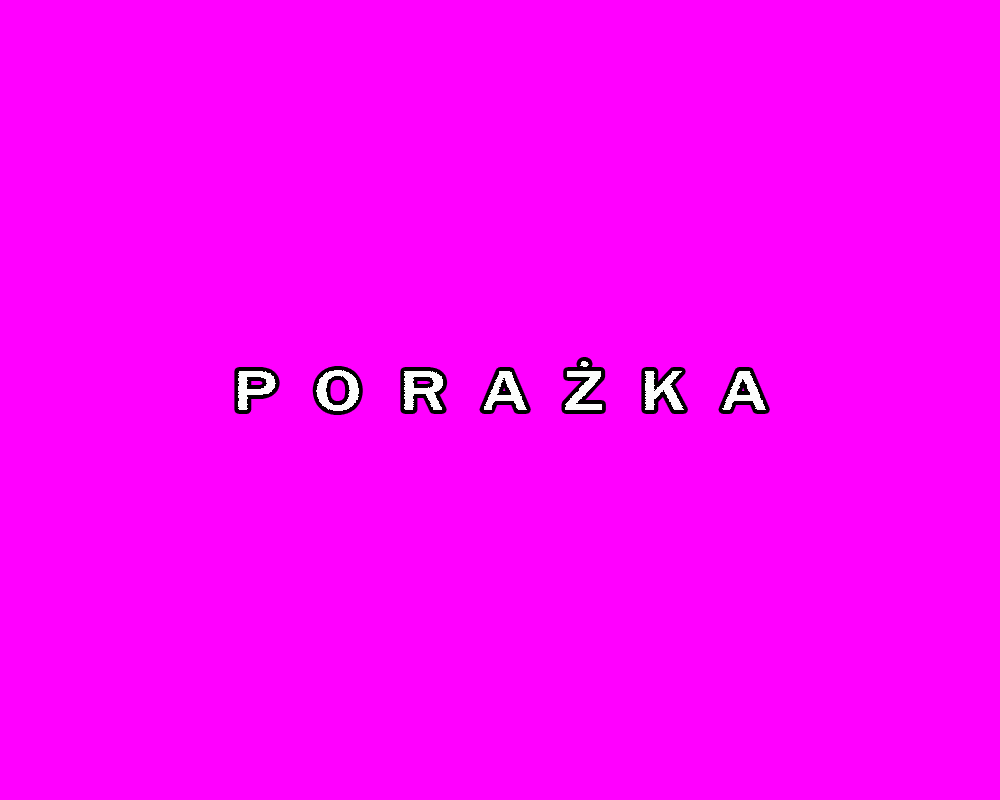
<style>
.page{position:relative;width:1000px;height:800px;background:#ff00ff}
.page>*{position:absolute;margin:0}
.t1{font:58px "FranklinGothic-Medium";letter-spacing:0.5em;color:#fcfdfc;scale:1.27 1}
</style>
<div class="page">
<p class="t1" style="left:238px;top:361px;width:528px;height:50px">PORAŻKA</p>
</div>
